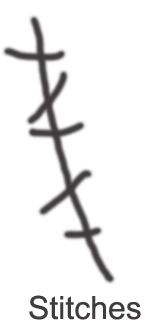
<style>
.page{position:relative;width:157px;height:335px;background:#ffffff}
.page>*{position:absolute;margin:0}
.t1{font:32px "ArialMT";color:#403c3d}
</style>
<div class="page">
<p class="t1" style="left:29px;top:295px;width:112px;height:25px">Stitches</p>
</div>
